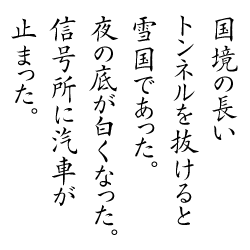
<style>
.page{position:relative;width:250px;height:250px;background:#ffffff}
.page>*{position:absolute;margin:0}
.t1{font:30px/40px "OutaiKaiStd-Light";color:#000000}
</style>
<div class="page">
<p class="t1" style="left:11px;top:15px;width:227px;height:220px">国境の長い<br>トンネルを抜けると<br>雪国であった。<br>夜の底が白くなった。<br>信号所に汽車が<br>止まった。</p>
</div>
